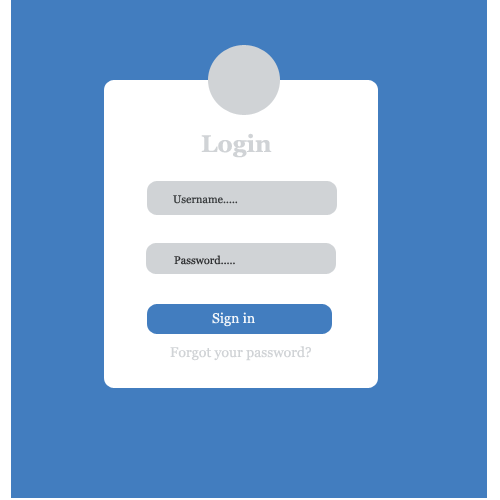
<style>
.page{position:relative;width:500px;height:500px;background:#427dbf}
.page>*{position:absolute;margin:0}
.t1{font:24px "Georgia-Bold";color:#d0d3d6}
.t2{font:11px "Georgia";color:#3b3e40}
.t3{font:11px "Georgia";color:#303133}
.t4{font:14px "Georgia";color:#f3f7fb}
.t5{font:14px "Georgia";color:#d0d3d6}
</style>
<div class="page">
<p class="t1" style="left:201px;top:133px;width:71px;height:25px">Login</p>
<p class="t2" style="left:173px;top:195px;width:65px;height:9px">Username.....</p>
<p class="t3" style="left:174px;top:255px;width:61px;height:10px">Password.....</p>
<p class="t4" style="left:212px;top:312px;width:43px;height:15px">Sign in</p>
<p class="t5" style="left:170px;top:346px;width:141px;height:15px">Forgot your password?</p>
</div>
